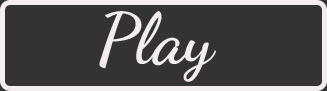
<style>
.page{position:relative;width:327px;height:91px;background:#333333}
.page>*{position:absolute;margin:0}
.t1{font:70.7px "DancingScript-Bold";color:#f3eded}
</style>
<div class="page">
<p class="t1" style="left:99px;top:11px;width:117px;height:71px">Play</p>
</div>
